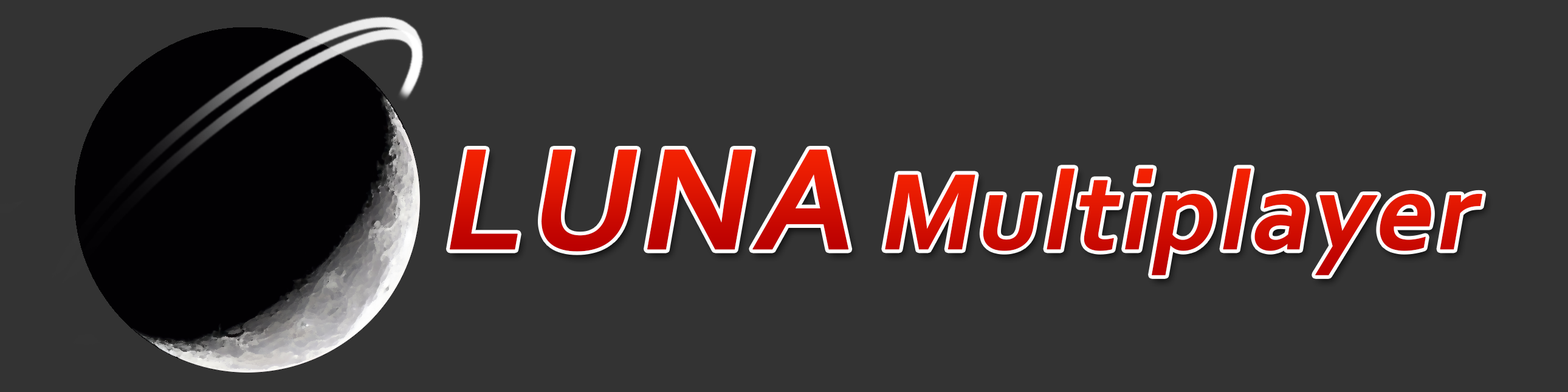
<style>
.page{position:relative;width:1568px;height:392px;background:#333333}
.page>*{position:absolute;margin:0}
.t1{font:151.9px "Corbel-Bold";font-weight:bold;font-style:italic}
.t2{font:113.9px "Corbel-Bold";color:#d91202;font-weight:bold;font-style:italic}
</style>
<div class="page">
<p class="t1" style="left:449px;top:150px;width:400px;height:102px">LUNA</p>
<p class="t2" style="left:885px;top:168px;width:598px;height:107px">Multiplayer</p>
</div>
